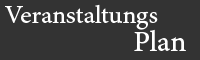
<style>
.page{position:relative;width:200px;height:60px;background:#333333}
.page>*{position:absolute;margin:0}
.t1{font:25px "AdobeHebrew-Regular";color:#ffffff}
.t2{font:29px "AdobeHebrew-Regular";color:#ffffff}
</style>
<div class="page">
<p class="t1" style="left:5px;top:4px;width:153px;height:26px">Veranstaltungs</p>
<p class="t2" style="left:134px;top:29px;width:52px;height:22px">Plan</p>
</div>
